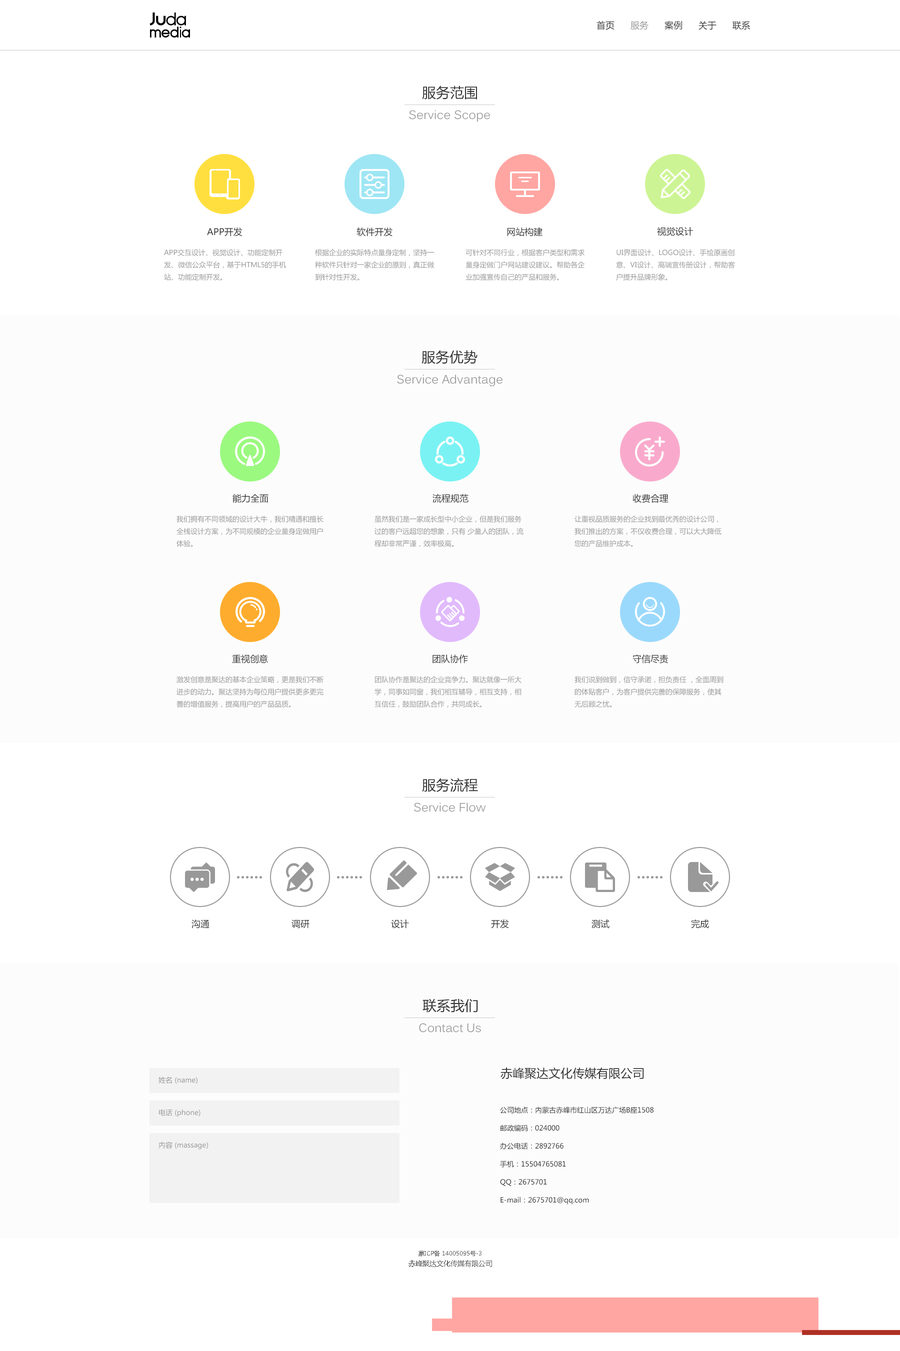
<style>
.page{position:relative;width:900px;height:1351px;background:#fcfcfc}
.page>*{position:absolute;margin:0}
.t1{font:9px "MicrosoftYaHei";color:#333333}
.t2{font:9px "MicrosoftYaHei";color:#999999}
.t3{font:14px "MicrosoftYaHei";color:#333333}
.t4{font:12px "Kalinga";color:#999999}
.t5{font:7px "MicrosoftYaHei";color:#999999}
.t6{font:12px "MicrosoftYaHei";color:#333333}
.t7{font:7px/18px "MicrosoftYaHei";color:#333333}
.t8{font:6px "MicrosoftYaHei";color:#666666}
.t9{font:7px "MicrosoftYaHei";color:#666666}
</style>
<div class="page">
<p class="t1" style="left:597px;top:21px;width:154px;height:9px">首页      <span class="t2">服务</span>      案例      关于      联系</p>
<p class="t3" style="left:422px;top:86px;width:55px;height:14px">服务范围</p>
<p class="t4" style="left:409px;top:110px;width:81px;height:12px">Service Scope</p>
<p class="t1" style="left:207px;top:228px;width:36px;height:9px">APP开发</p>
<p class="t1" style="left:357px;top:228px;width:36px;height:9px">软件开发</p>
<p class="t1" style="left:507px;top:228px;width:36px;height:9px">网站构建</p>
<p class="t1" style="left:657px;top:227px;width:37px;height:9px">视觉设计</p>
<p class="t5" style="left:164px;top:249px;width:122px;height:32px">APP交互设计、视觉设计、功能定制开<br>发、微信公众平台，基于HTML5的手机<br>站、功能定制开发。</p>
<p class="t5" style="left:315px;top:249px;width:119px;height:32px">根据企业的实际特点量身定制，坚持一<br>种软件只针对一家企业的原则，真正做<br>到针对性开发。</p>
<p class="t5" style="left:466px;top:249px;width:119px;height:32px">可针对不同行业，根据客户类型和需求<br>量身定做门户网站建设建议。帮助各企<br>业加强宣传自己的产品和服务。</p>
<p class="t5" style="left:616px;top:249px;width:119px;height:32px">UI界面设计、LOGO设计、手绘原画创<br>意、VI设计、高端宣传册设计，帮助客<br>户提升品牌形象。</p>
<p class="t3" style="left:422px;top:350px;width:56px;height:14px">服务优势</p>
<p class="t4" style="left:397px;top:375px;width:106px;height:12px">Service Advantage</p>
<p class="t1" style="left:233px;top:494px;width:36px;height:9px">能力全面</p>
<p class="t1" style="left:433px;top:494px;width:36px;height:9px">流程规范</p>
<p class="t1" style="left:633px;top:494px;width:36px;height:9px">收费合理</p>
<p class="t5" style="left:177px;top:516px;width:147px;height:31px">我们拥有不同领域的设计大牛，我们精通和擅长<br>全桟设计方案，为不同规模的企业量身定做用户<br>体验。</p>
<p class="t5" style="left:375px;top:516px;width:149px;height:31px">虽然我们是一家成长型中小企业，但是我们服务<br>过的客户远超您的想象，只有 少量人的团队，流<br>程却非常严谨，效率极高。</p>
<p class="t5" style="left:575px;top:516px;width:147px;height:31px">让重视品质服务的企业找到最优秀的设计公司，<br>我们推出的方案，不仅收费合理，可以大大降低<br>您的产品维护成本。</p>
<p class="t1" style="left:232px;top:654px;width:36px;height:10px">重视创意</p>
<p class="t1" style="left:433px;top:655px;width:35px;height:9px">团队协作</p>
<p class="t1" style="left:633px;top:655px;width:36px;height:9px">守信尽责</p>
<p class="t5" style="left:177px;top:676px;width:147px;height:32px">激发创意是聚达的基本企业策略，更是我们不断<br>进步的动力。聚达坚持为每位用户提供更多更完<br>善的增值服务，提高用户的产品品质。</p>
<p class="t5" style="left:375px;top:676px;width:147px;height:32px">团队协作是聚达的企业竞争力。聚达就像一所大<br>学，同事如同窗，我们相互辅导，相互支持，相<br>互信任，鼓励团队合作，共同成长。</p>
<p class="t5" style="left:575px;top:676px;width:149px;height:32px">我们说到做到，信守承诺，担负责任 ，全面周到<br>的体贴客户，为客户提供完善的保障服务，使其<br>无后顾之忧。</p>
<p class="t3" style="left:422px;top:778px;width:56px;height:14px">服务流程</p>
<p class="t4" style="left:414px;top:803px;width:72px;height:9px">Service Flow</p>
<p class="t1" style="left:192px;top:920px;width:18px;height:9px">沟通</p>
<p class="t1" style="left:292px;top:920px;width:18px;height:9px">调研</p>
<p class="t1" style="left:391px;top:920px;width:18px;height:9px">设计</p>
<p class="t1" style="left:491px;top:920px;width:18px;height:9px">开发</p>
<p class="t1" style="left:592px;top:920px;width:18px;height:9px">测试</p>
<p class="t1" style="left:691px;top:920px;width:18px;height:9px">完成</p>
<p class="t3" style="left:423px;top:999px;width:55px;height:14px">联系我们</p>
<p class="t4" style="left:419px;top:1023px;width:62px;height:10px">Contact Us</p>
<p class="t6" style="left:501px;top:1068px;width:143px;height:12px">赤峰聚达文化传媒有限公司</p>
<p class="t5" style="left:159px;top:1077px;width:39px;height:7px">姓名 (name)</p>
<p class="t5" style="left:159px;top:1109px;width:42px;height:8px">电话 (phone)</p>
<p class="t7" style="left:500px;top:1107px;width:154px;height:98px">公司地点：内蒙古赤峰市红山区万达广场B座1508<br>邮政编码：024000<br>办公电话：2892766<br>手机：15504765081<br>QQ：2675701<br>E-mail：2675701@qq.com</p>
<p class="t5" style="left:159px;top:1142px;width:49px;height:8px">内容 (massage)</p>
<p class="t8" style="left:419px;top:1251px;width:63px;height:6px">蒙ICP备 14005095号-3</p>
<p class="t9" style="left:409px;top:1260px;width:83px;height:7px">赤峰聚达文化传媒有限公司</p>
</div>
